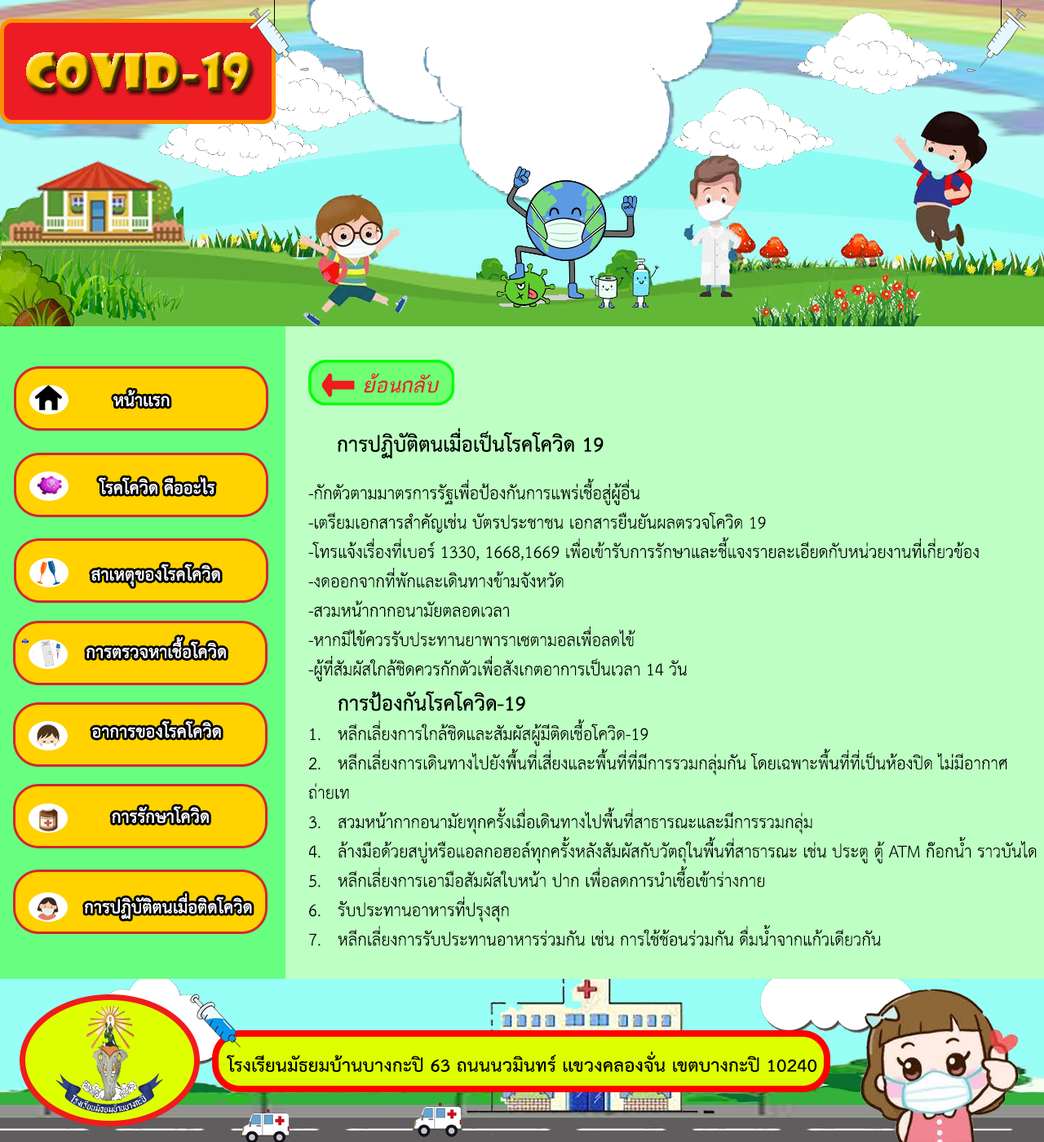
<style>
.page{position:relative;width:1044px;height:1142px;background:#beffc3}
.page>*{position:absolute;margin:0}
.t1{font:24.5px "THSarabunPSK-Bold";color:#ffffff}
.t2{font:29.4px "THSarabunPSK-Bold";color:#000000}
.t3{font:24.5px "THSarabunPSK";color:#000000}
</style>
<div class="page">
<p class="t1" style="left:113px;top:390px;width:57px;height:17px">หน้าเเรก</p>
<p class="t2" style="left:338px;top:428px;width:266px;height:31px">การปฏิบัติตนเมื่อเป็นโรคโควิด 19</p>
<p class="t1" style="left:99px;top:477px;width:116px;height:17px">โรคโควิด คืออะไร</p>
<p class="t3" style="left:308px;top:478px;width:729px;height:468px">-กักตัวตามมาตรการรัฐเพื่อป้องกันการแพร่เชื้อสู่ผู้อื่น<br>-เตรียมเอกสารสำคัญเช่น บัตรประชาชน เอกสารยืนยันผลตรวจโควิด 19<br>-โทรแจ้งเรื่องที่เบอร์ 1330, 1668,1669 เพื่อเข้ารับการรักษาและชี้แจงรายละเอียดกับหน่วยงานที่เกี่ยวข้อง<br>-งดออกจากที่พักและเดินทางข้ามจังหวัด<br>-สวมหน้ากากอนามัยตลอดเวลา<br>-หากมีไข้ควรรับประทานยาพาราเซตามอลเพื่อลดไข้<br>-ผู้ที่สัมผัสใกล้ชิดควรกักตัวเพื่อสังเกตอาการเป็นเวลา 14 วัน<br> <span class="t2">การป้องกันโรคโควิด-19<br></span>1. หลีกเลี่ยงการใกล้ชิดและสัมผัสผู้มีติดเชื้อโควิด-19<br>2. หลีกเลี่ยงการเดินทางไปยังพื้นที่เสี่ยงและพื้นที่ที่มีการรวมกลุ่มกัน โดยเฉพาะพื้นที่ที่เป็นห้องปิด ไม่มีอากาศ<br>ถ่ายเท<br>3. สวมหน้ากากอนามัยทุกครั้งเมื่อเดินทางไปพื้นที่สาธารณะและมีการรวมกลุ่ม<br>4. ล้างมือด้วยสบู่หรือแอลกอฮอล์ทุกครั้งหลังสัมผัสกับวัตถุในพื้นที่สาธารณะ เช่น ประตู ตู้ ATM ก๊อกน้ำ ราวบันได<br>5. หลีกเลี่ยงการเอามือสัมผัสใบหน้า ปาก เพื่อลดการนำเชื้อเข้าร่างกาย<br>6. รับประทานอาหารที่ปรุงสุก<br>7. หลีกเลี่ยงการรับประทานอาหารร่วมกัน เช่น การใช้ช้อนร่วมกัน ดื่มน้ำจากแก้วเดียวกัน</p>
<p class="t1" style="left:91px;top:564px;width:129px;height:23px">สาเหตุของโรคโควิด</p>
<p class="t1" style="left:86px;top:637px;width:140px;height:21px">การตรวจหาเชื้อโควิด</p>
<p class="t1" style="left:92px;top:721px;width:129px;height:17px">อาการของโรคโควิด</p>
<p class="t1" style="left:112px;top:806px;width:97px;height:17px">การรักษาโควิด</p>
<p class="t1" style="left:85px;top:893px;width:167px;height:26px">การปฏิบัติตนเมื่อติดโควิด</p>
</div>
